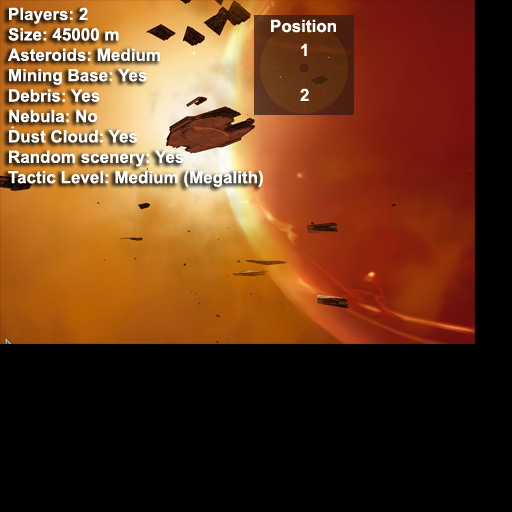
<style>
.page{position:relative;width:512px;height:512px;background:#000000}
.page>*{position:absolute;margin:0}
.t1{font:17px "Arial-BoldMT";color:#ffffff}
.t2{font:17px "Arial-BoldMT";color:#fefffe}
</style>
<div class="page">
<p class="t1" style="left:8px;top:7px;width:255px;height:180px">Players: 2<br>Size: 45000 m<br>Asteroids: Medium<br>Mining Base: Yes<br>Debris: Yes<br>Nebula: No<br>Dust Cloud: Yes<br>Random scenery: Yes<br>Tactic Level: Medium (Megalith)</p>
<p class="t2" style="left:271px;top:19px;width:65px;height:14px">Position</p>
<p class="t1" style="left:301px;top:43px;width:6px;height:13px">1</p>
<p class="t1" style="left:300px;top:88px;width:9px;height:13px">2</p>
</div>
